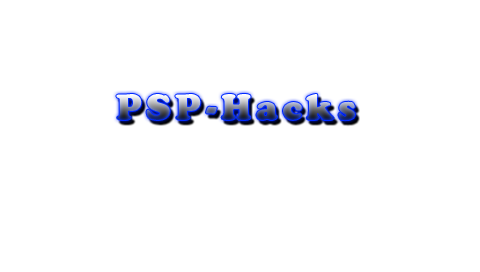
<style>
.page{position:relative;width:480px;height:272px;background:#ffffff}
.page>*{position:absolute;margin:0}
.t1{font:36px "CooperBlackStd";letter-spacing:0.125em}
</style>
<div class="page">
<p class="t1" style="left:116px;top:94px;width:239px;height:27px">PSP-Hacks</p>
</div>
